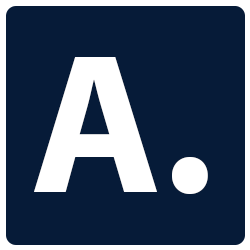
<style>
.page{position:relative;width:250px;height:250px;background:#061b38}
.page>*{position:absolute;margin:0}
.t1{font:200px "MyriadPro-Bold";color:#ffffff}
</style>
<div class="page">
<p class="t1" style="left:34px;top:57px;width:174px;height:137px">A.</p>
</div>
